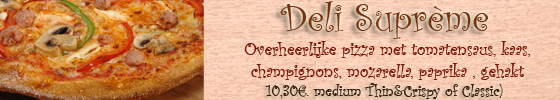
<style>
.page{position:relative;width:560px;height:100px}
.page>*{position:absolute;margin:0}
.t1{font:40px "CurlzMT";color:#78300d}
.t2{font:18px "CurlzMT";color:#771808}
.t3{font:16px "CurlzMT";color:#3f190b}
</style>
<div class="page">
<p class="t1" style="left:280px;top:1px;width:208px;height:38px">Deli Suprème</p>
<p class="t2" style="left:244px;top:41px;width:287px;height:39px;text-align:center">Overheerlijke pizza met tomatensaus, kaas, <br>champignons, mozarella, paprika , gehakt</p>
<p class="t3" style="left:265px;top:83px;width:238px;height:16px">10,30€. medium Thin&amp;Crispy of Classic)</p>
</div>
